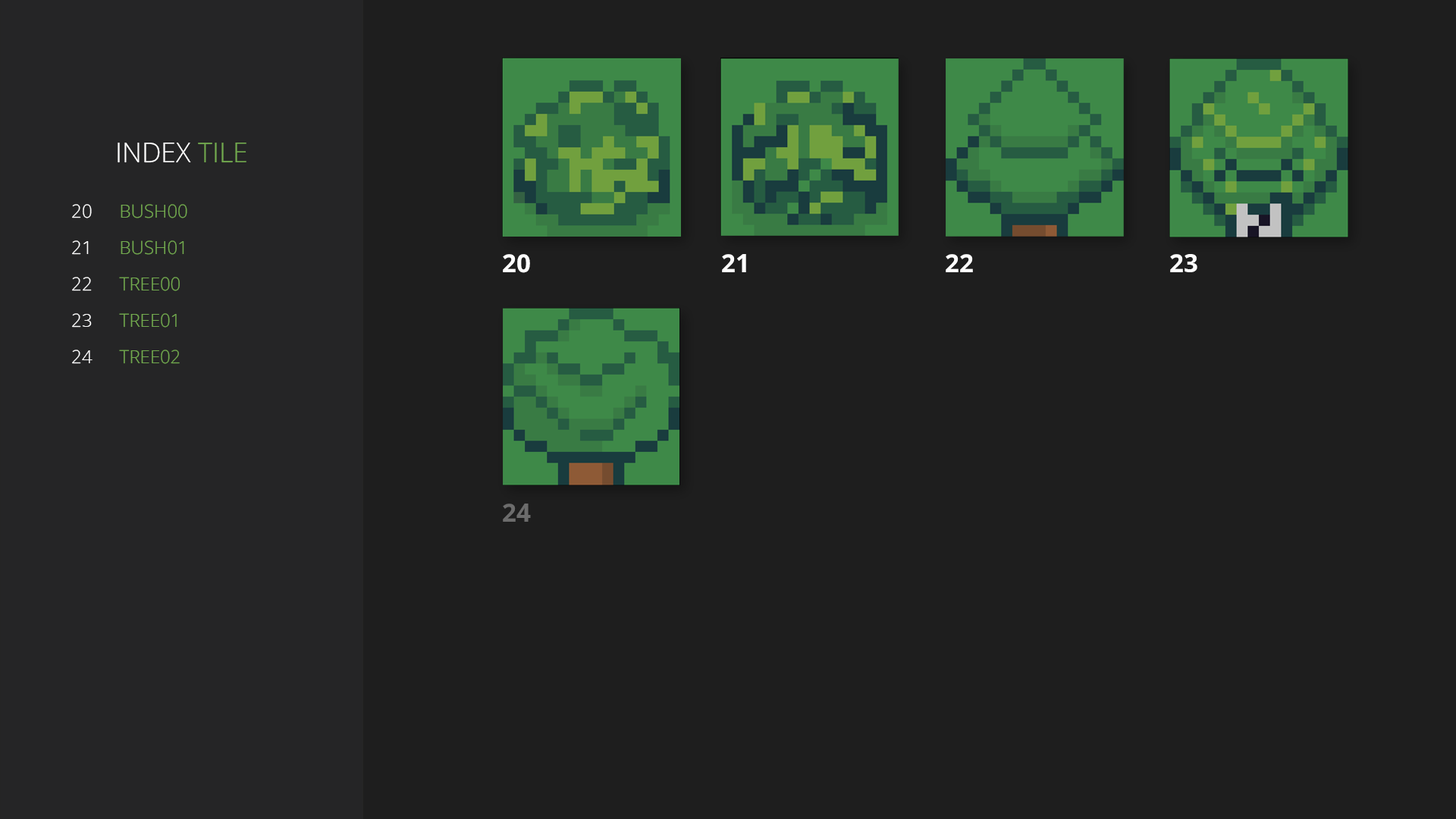
<style>
.page{position:relative;width:1456px;height:819px;background:#1e1e1e}
.page>*{position:absolute;margin:0}
.t1{font:27.3px "OpenSans-Light";color:#ffffff;text-transform:uppercase}
.t2{font:27.3px "OpenSans-Light";color:#73aa4f;text-transform:uppercase}
.t3{font:18.2px/36.4px "OpenSans-Light";color:#ffffff;text-transform:uppercase}
.t4{font:18.2px/36.4px "OpenSans-Light";color:#73aa4f;text-transform:uppercase}
.t5{font:25.1px "OpenSans-Bold";color:#ffffff;text-transform:uppercase}
.t6{font:25.1px "OpenSans-Bold";color:#6c6c6c;text-transform:uppercase}
</style>
<div class="page">
<p class="t1" style="left:118px;top:143px;width:128px;height:20px">index<span class="t2"> tile</span></p>
<p class="t3" style="left:72px;top:204px;width:21px;height:160px;text-align:center">20<br>21<br>22<br>23<br>24</p>
<p class="t4" style="left:119px;top:204px;width:68px;height:160px">bush00<br>bush01<br>tree00<br>tree01<br>tree02</p>
<p class="t5" style="left:503px;top:254px;width:27px;height:19px">20</p>
<p class="t5" style="left:722px;top:254px;width:24px;height:18px">21</p>
<p class="t5" style="left:946px;top:254px;width:27px;height:18px">22</p>
<p class="t5" style="left:1170px;top:254px;width:27px;height:18px">23</p>
<p class="t6" style="left:503px;top:504px;width:28px;height:18px">24</p>
</div>
